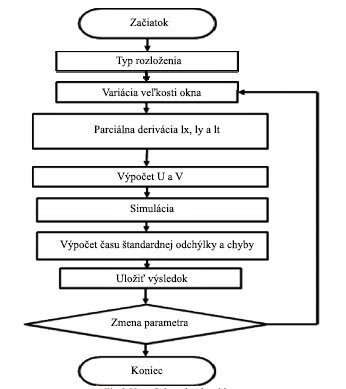
<style>
.page{position:relative;width:346px;height:389px;background:#ffffff}
.page>*{position:absolute;margin:0}
.t1{font:11px "TimesNewRomanPSMT";color:#000000}
</style>
<div class="page">
<p class="t1" style="left:130px;top:18px;width:39px;height:9px">Začiatok</p>
<p class="t1" style="left:116px;top:56px;width:66px;height:11px">Typ rozloženia</p>
<p class="t1" style="left:102px;top:88px;width:100px;height:9px">Variácia veľkosti okna</p>
<p class="t1" style="left:94px;top:125px;width:126px;height:11px">Parciálna derivácia lx, ly a lt</p>
<p class="t1" style="left:117px;top:172px;width:66px;height:11px">Výpočet U a V</p>
<p class="t1" style="left:130px;top:204px;width:44px;height:9px">Simulácia</p>
<p class="t1" style="left:60px;top:240px;width:194px;height:11px">Výpočet času štandardnej odchýlky a chyby</p>
<p class="t1" style="left:116px;top:274px;width:72px;height:11px">Uložiť výsledok</p>
<p class="t1" style="left:111px;top:318px;width:78px;height:11px">Zmena parametra</p>
<p class="t1" style="left:131px;top:366px;width:32px;height:9px">Koniec</p>
</div>
